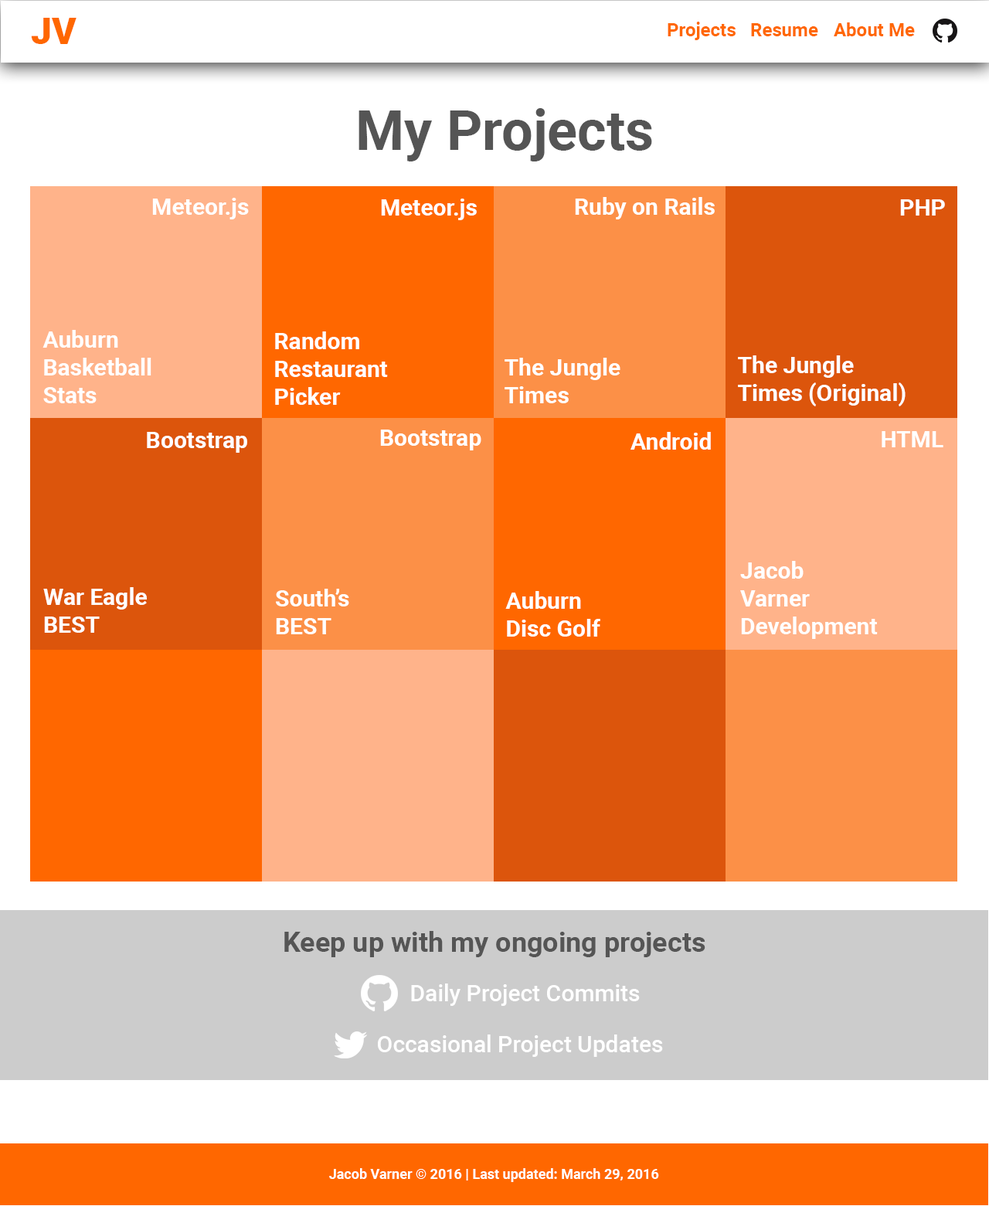
<style>
.page{position:relative;width:989px;height:1206px;background:#ffffff}
.page>*{position:absolute;margin:0}
.t1{font:37.1px "Roboto-Black";color:#ff6700}
.t2{font:18.5px "Roboto-Bold";color:#ff6700}
.t3{font:55.6px "Roboto-Bold";color:#555555}
.t4{font:23.2px "Roboto-Bold";color:#ffffff}
.t5{font:27.8px "Roboto-Bold";color:#555555}
.t6{font:23.2px "Roboto-Medium";color:#ffffff}
.t7{font:13.9px "Roboto-Bold";color:#ffffff}
</style>
<div class="page">
<p class="t1" style="left:31px;top:18px;width:45px;height:26px">JV</p>
<p class="t2" style="left:667px;top:22px;width:248px;height:18px">Projects Resume About Me</p>
<p class="t3" style="left:358px;top:108px;width:294px;height:53px">My Projects</p>
<p class="t4" style="left:152px;top:198px;width:97px;height:21px">Meteor.js</p>
<p class="t4" style="left:575px;top:197px;width:140px;height:22px">Ruby on Rails</p>
<p class="t4" style="left:381px;top:199px;width:96px;height:21px">Meteor.js</p>
<p class="t4" style="left:900px;top:199px;width:45px;height:17px">PHP</p>
<p class="t4" style="left:42px;top:330px;width:109px;height:73px">Auburn<br>Basketball<br>Stats</p>
<p class="t4" style="left:275px;top:331px;width:113px;height:74px">Random<br>Restaurant<br>Picker</p>
<p class="t4" style="left:504px;top:358px;width:116px;height:45px">The Jungle<br>Times</p>
<p class="t4" style="left:738px;top:355px;width:167px;height:51px">The Jungle<br>Times (Original)</p>
<p class="t4" style="left:147px;top:432px;width:100px;height:21px">Bootstrap</p>
<p class="t4" style="left:380px;top:430px;width:101px;height:20px">Bootstrap</p>
<p class="t4" style="left:630px;top:432px;width:81px;height:18px">Android</p>
<p class="t4" style="left:881px;top:431px;width:62px;height:16px">HTML</p>
<p class="t4" style="left:740px;top:561px;width:138px;height:78px">Jacob<br>Varner<br>Development</p>
<p class="t4" style="left:43px;top:587px;width:104px;height:46px">War Eagle<br>BEST</p>
<p class="t4" style="left:276px;top:589px;width:73px;height:45px">South’s<br>BEST</p>
<p class="t4" style="left:505px;top:591px;width:95px;height:46px">Auburn<br>Disc Golf</p>
<p class="t5" style="left:284px;top:931px;width:421px;height:26px">Keep up with my ongoing projects</p>
<p class="t6" style="left:411px;top:983px;width:229px;height:23px">Daily Project Commits</p>
<p class="t6" style="left:378px;top:1034px;width:285px;height:23px">Occasional Project Updates</p>
<p class="t7" style="left:329px;top:1168px;width:330px;height:14px">Jacob Varner © 2016 | Last updated: March 29, 2016</p>
</div>
